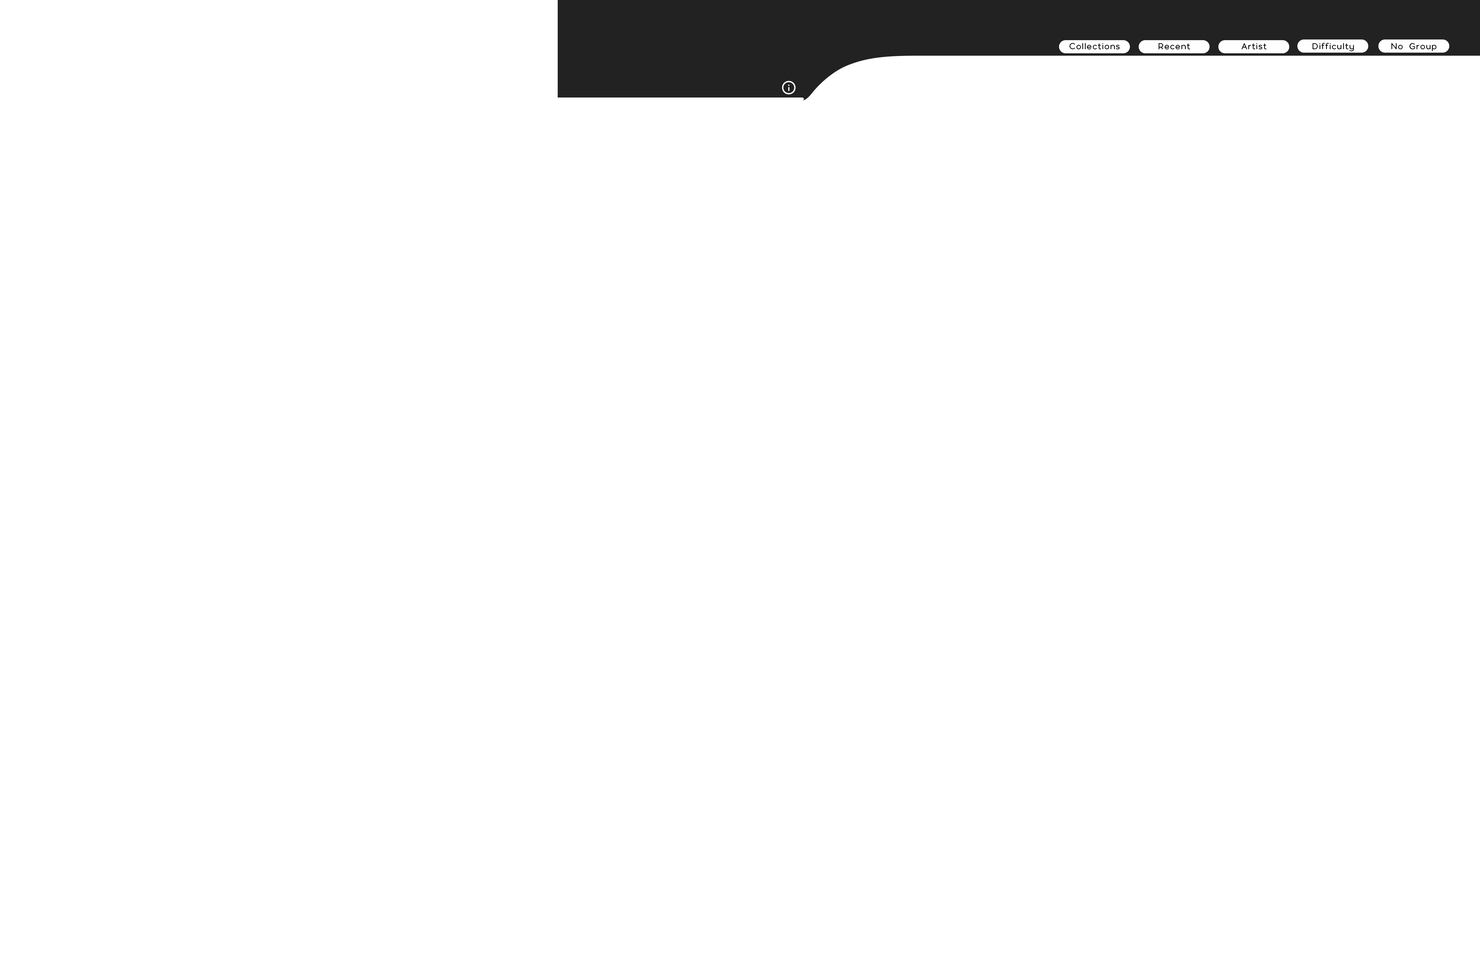
<style>
.page{position:relative;width:1480px;height:961px;background:#ffffff}
.page>*{position:absolute;margin:0}
.t1{font:9px "PollyRounded-Regular";color:#000000}
</style>
<div class="page">
<p class="t1" style="left:1069px;top:43px;width:50px;height:7px">Collections</p>
<p class="t1" style="left:1158px;top:43px;width:32px;height:7px">Recent</p>
<p class="t1" style="left:1241px;top:43px;width:25px;height:7px">Artist</p>
<p class="t1" style="left:1312px;top:43px;width:42px;height:8px">Difficulty</p>
<p class="t1" style="left:1391px;top:43px;width:45px;height:8px">No Group</p>
</div>
